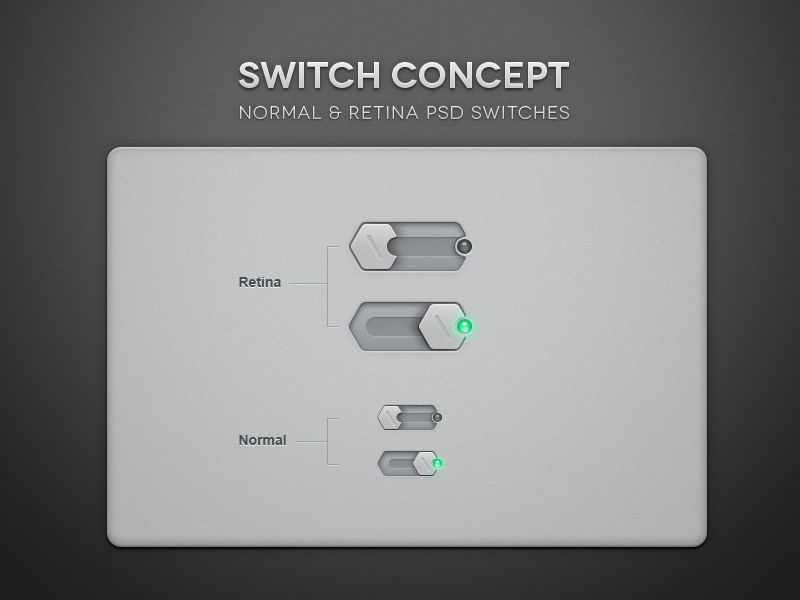
<style>
.page{position:relative;width:800px;height:600px}
.page>*{position:absolute;margin:0}
.t1{font:36px "Novecentowide-DemiBold";color:#dbddde}
.t2{font:18px "Novecentowide-Book";letter-spacing:0.07em;color:#d6d7da}
.t3{font:14px "Arial-BoldMT";color:#4a5052}
</style>
<div class="page">
<p class="t1" style="left:238px;top:62px;width:331px;height:26px">Switch Concept</p>
<p class="t2" style="left:240px;top:106px;width:329px;height:13px">normal &amp; retina psd switches</p>
<p class="t3" style="left:239px;top:277px;width:42px;height:10px">Retina</p>
<p class="t3" style="left:239px;top:435px;width:47px;height:10px">Normal</p>
</div>
